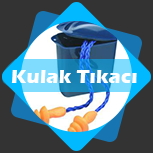
<style>
.page{position:relative;width:153px;height:153px;background:#333333}
.page>*{position:absolute;margin:0}
.t1{font:20.3px "ErasITC-Bold";color:#ffffff}
</style>
<div class="page">
<p class="t1" style="left:11px;top:70px;width:126px;height:13px">Kulak Tıkacı</p>
</div>
